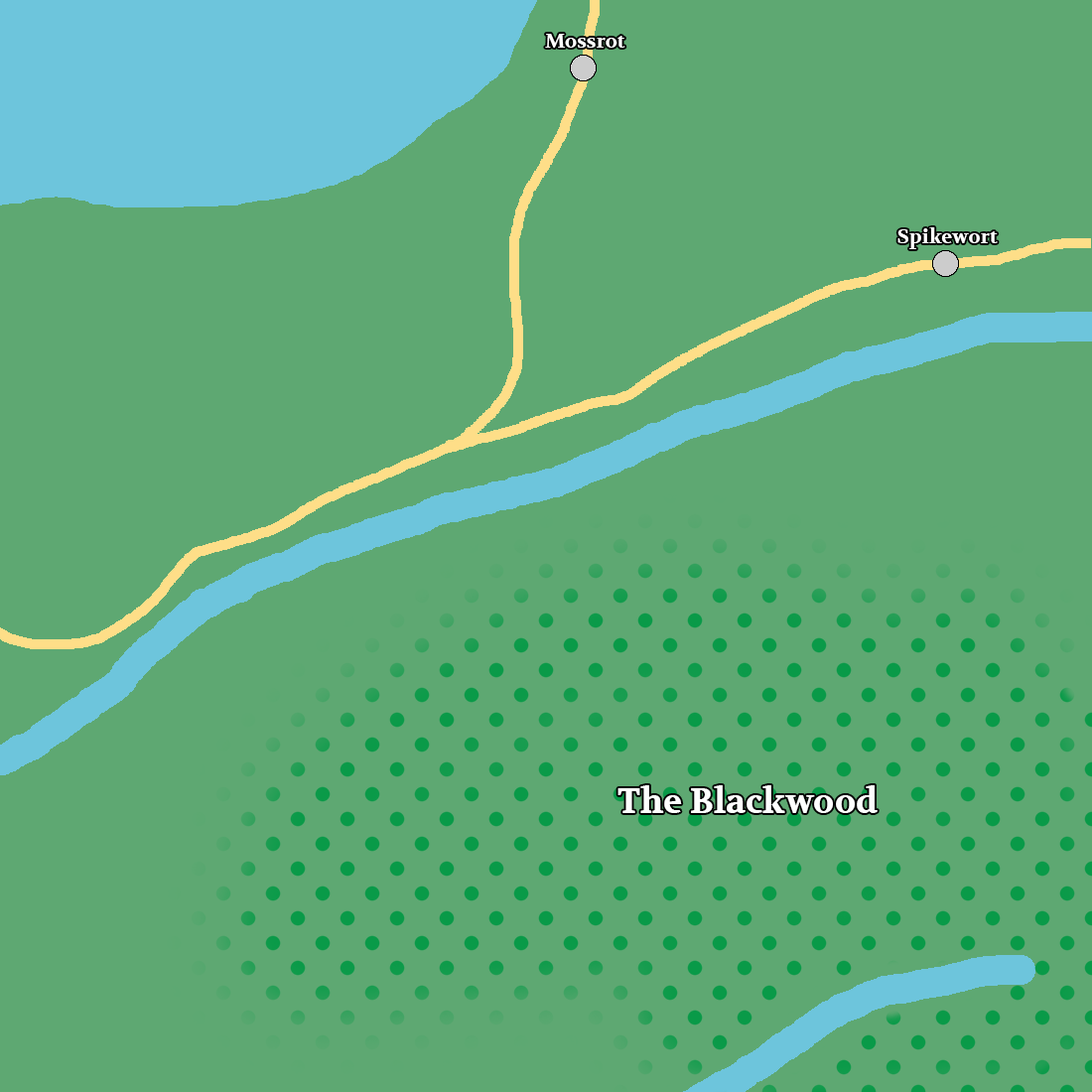
<style>
.page{position:relative;width:1092px;height:1092px;background:#5ea872}
.page>*{position:absolute;margin:0}
.t1{font:19.9px "Volkhov-Bold";color:#ffffff}
.t2{font:34.7px "Volkhov-Bold";color:#ffffff}
</style>
<div class="page">
<p class="t1" style="left:545px;top:34px;width:80px;height:14px">Mossrot</p>
<p class="t1" style="left:897px;top:227px;width:101px;height:22px">Spikewort</p>
<p class="t2" style="left:617px;top:785px;width:261px;height:28px">The Blackwood</p>
</div>
